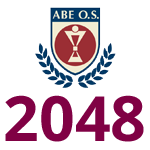
<style>
.page{position:relative;width:150px;height:150px;background:#ffffff}
.page>*{position:absolute;margin:0}
.t1{font:62.5px "OpenSans-Bold";color:#800144;text-transform:uppercase}
</style>
<div class="page">
<p class="t1" style="left:5px;top:95px;width:139px;height:47px">2048</p>
</div>
